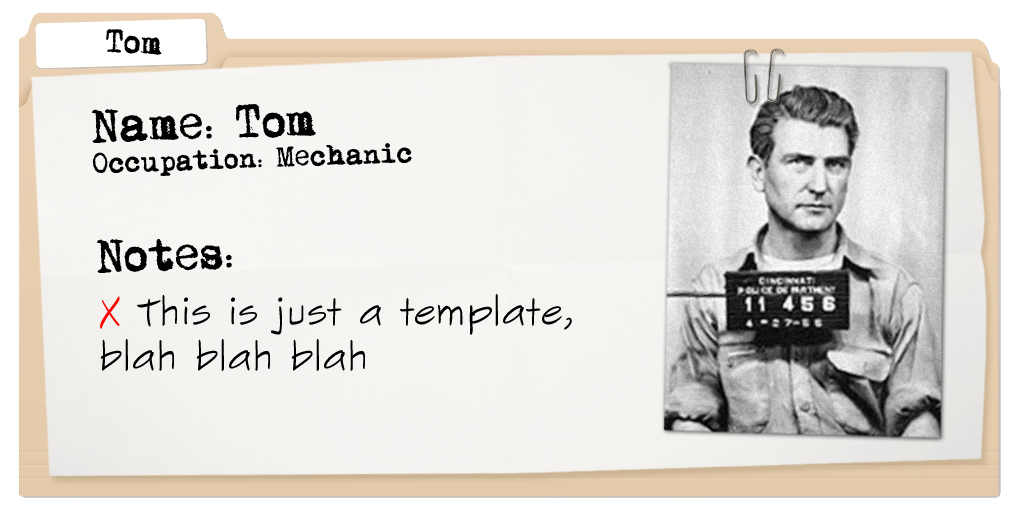
<style>
.page{position:relative;width:1024px;height:512px}
.page>*{position:absolute;margin:0}
.t1{font:29.2px "MomsTypewriter";color:#000000}
.t2{font:25px "MomsTypewriter";color:#000000}
.t3{font:41.7px "MomsTypewriter";color:#000000}
.t4{font:37.5px "SketchFlowPrint";color:#000000}
.t5{font:37.5px "SketchFlowPrint";color:#ff0000}
</style>
<div class="page">
<p class="t1" style="left:106px;top:29px;width:56px;height:26px;rotate:3deg">Tom</p>
<p class="t2" style="left:91px;top:104px;width:321px;height:169px;rotate:-2deg"><span class="t3">Name: Tom<br></span>Occupation: Mechanic<br><span class="t3"><br>Notes:</span></p>
<p class="t4" style="left:100px;top:294px;width:472px;height:77px"><span class="t5">X</span> This is just a template, blah blah blah</p>
</div>
